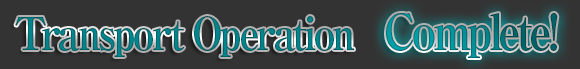
<style>
.page{position:relative;width:580px;height:69px;background:#333333}
.page>*{position:absolute;margin:0}
.t1{font:45px "RyuminPro-ExBold";letter-spacing:-0.08em;color:#007b81;scale:0.9 1}
.t2{font:50px "RyuminPro-ExBold";letter-spacing:-0.08em;scale:0.9 1}
</style>
<div class="page">
<p class="t1" style="left:15px;top:16px;width:339px;height:41px">Transport Operation</p>
<p class="t2" style="left:386px;top:13px;width:172px;height:45px">Complete!</p>
</div>
